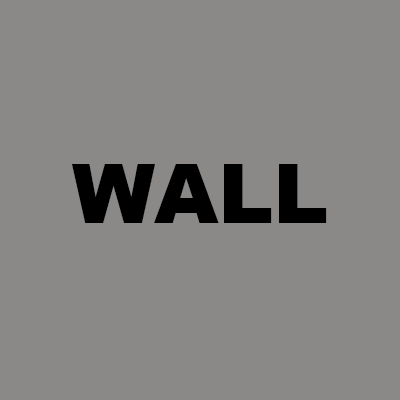
<style>
.page{position:relative;width:400px;height:400px;background:#8a8988}
.page>*{position:absolute;margin:0}
.t1{font:82.5px "Arial-Black";color:#000000}
</style>
<div class="page">
<p class="t1" style="left:72px;top:164px;width:255px;height:59px">WALL</p>
</div>
